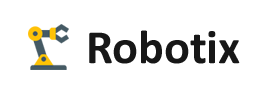
<style>
.page{position:relative;width:270px;height:96px;background:#ffffff}
.page>*{position:absolute;margin:0}
.t1{font:48px "Calibri-Bold";color:#171717}
</style>
<div class="page">
<p class="t1" style="left:89px;top:30px;width:151px;height:34px">Robotix</p>
</div>
